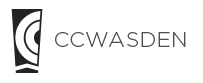
<style>
.page{position:relative;width:203px;height:83px;background:#ffffff}
.page>*{position:absolute;margin:0}
.t1{font:21.5px "GothamHTF-Light";color:#4f4f4f}
</style>
<div class="page">
<p class="t1" style="left:55px;top:32px;width:131px;height:15px">CCWASDEN</p>
</div>
